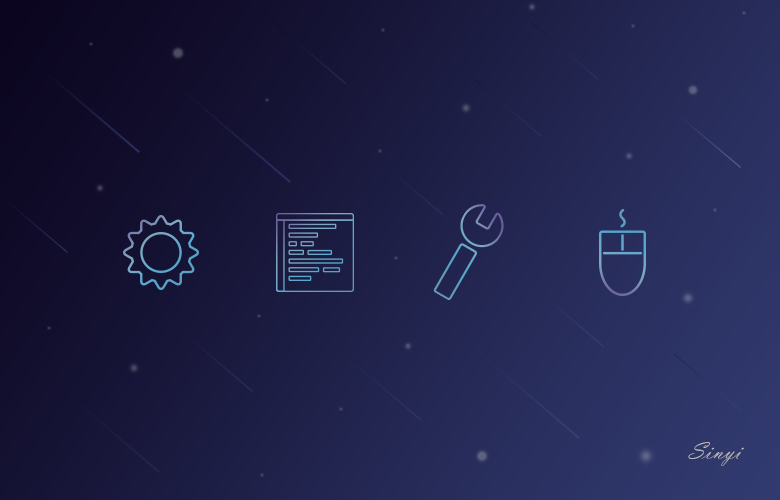
<style>
.page{position:relative;width:780px;height:500px}
.page>*{position:absolute;margin:0}
.t1{font:24px "VladimirScript";letter-spacing:0.05em;color:#bebebe}
</style>
<div class="page">
<p class="t1" style="left:688px;top:442px;width:56px;height:24px">Sinyi</p>
</div>
